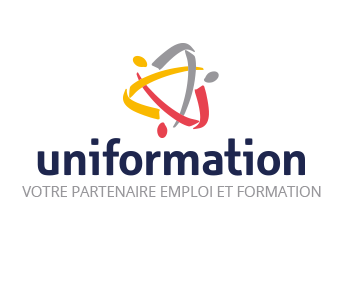
<style>
.page{position:relative;width:340px;height:300px;background:#ffffff}
.page>*{position:absolute;margin:0}
.t1{font:15px "OpenSans";letter-spacing:-0.015em;color:#98979b}
</style>
<div class="page">
<p class="t1" style="left:22px;top:186px;width:299px;height:11px">VOTRE PARTENAIRE EMPLOI ET FORMATION</p>
</div>
